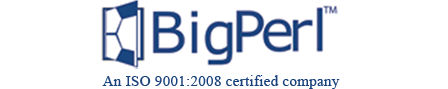
<style>
.page{position:relative;width:448px;height:89px;background:#ffffff}
.page>*{position:absolute;margin:0}
.t1{font:15px "TimesNewRomanPSMT";letter-spacing:0.02em;color:#19417b}
</style>
<div class="page">
<p class="t1" style="left:102px;top:75px;width:238px;height:14px">An ISO 9001:2008 certified company</p>
</div>
